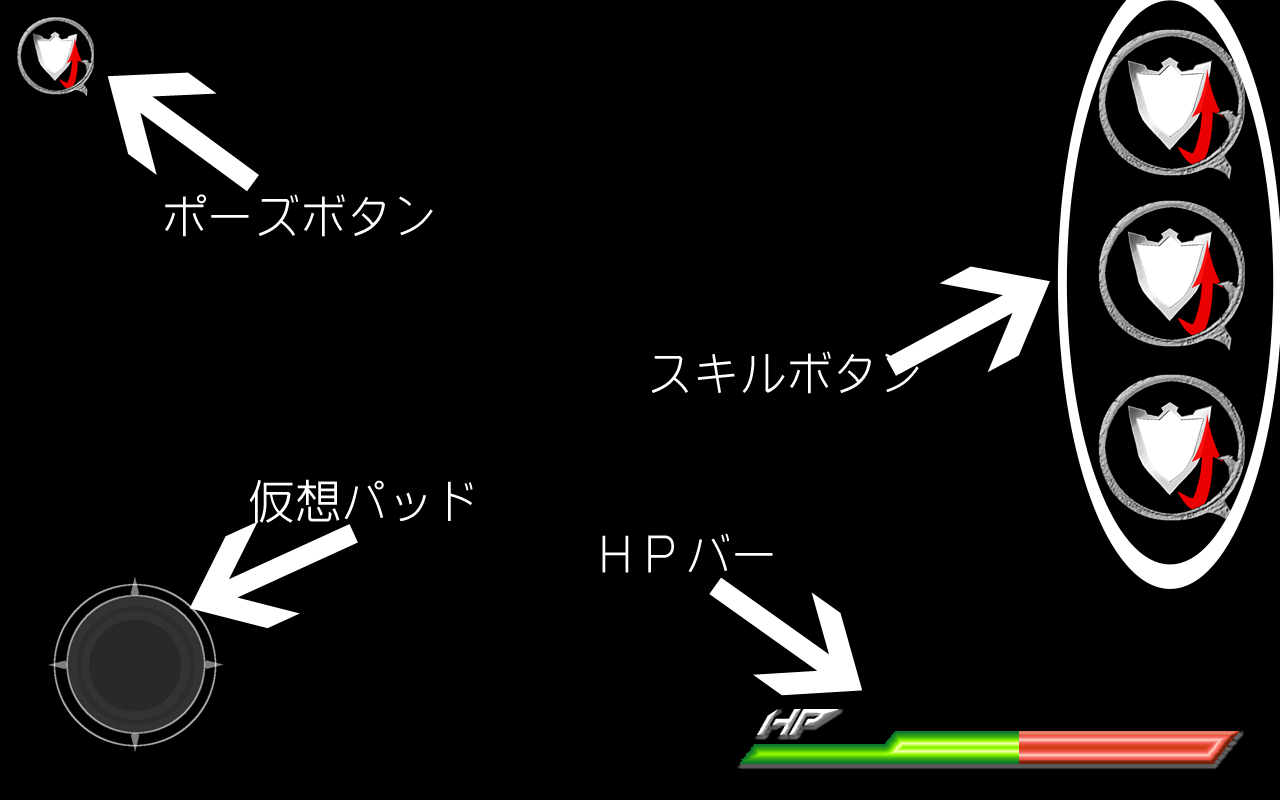
<style>
.page{position:relative;width:1280px;height:800px;background:#000000}
.page>*{position:absolute;margin:0}
.t1{font:46.5px "ARADGothicJP-Medium";color:#ffffff}
</style>
<div class="page">
<p class="t1" style="left:165px;top:194px;width:268px;height:43px">ポーズボタン</p>
<p class="t1" style="left:651px;top:351px;width:268px;height:43px">スキルボタン</p>
<p class="t1" style="left:249px;top:479px;width:224px;height:44px">仮想パッド</p>
<p class="t1" style="left:602px;top:533px;width:171px;height:40px">ＨＰバー</p>
</div>
